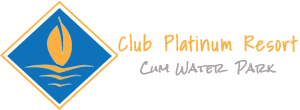
<style>
.page{position:relative;width:300px;height:110px;background:#ffffff}
.page>*{position:absolute;margin:0}
.t1{font:20px "ShadowsIntoLight";letter-spacing:0.05em;color:#fbb041;font-weight:bold}
.t2{font:11px "RockSalt";letter-spacing:0.05em;color:#aca5a5;font-weight:bold}
</style>
<div class="page">
<p class="t1" style="left:118px;top:33px;width:180px;height:19px">Club Platinum Resort</p>
<p class="t2" style="left:140px;top:60px;width:137px;height:16px">Cum Water  Park</p>
</div>
